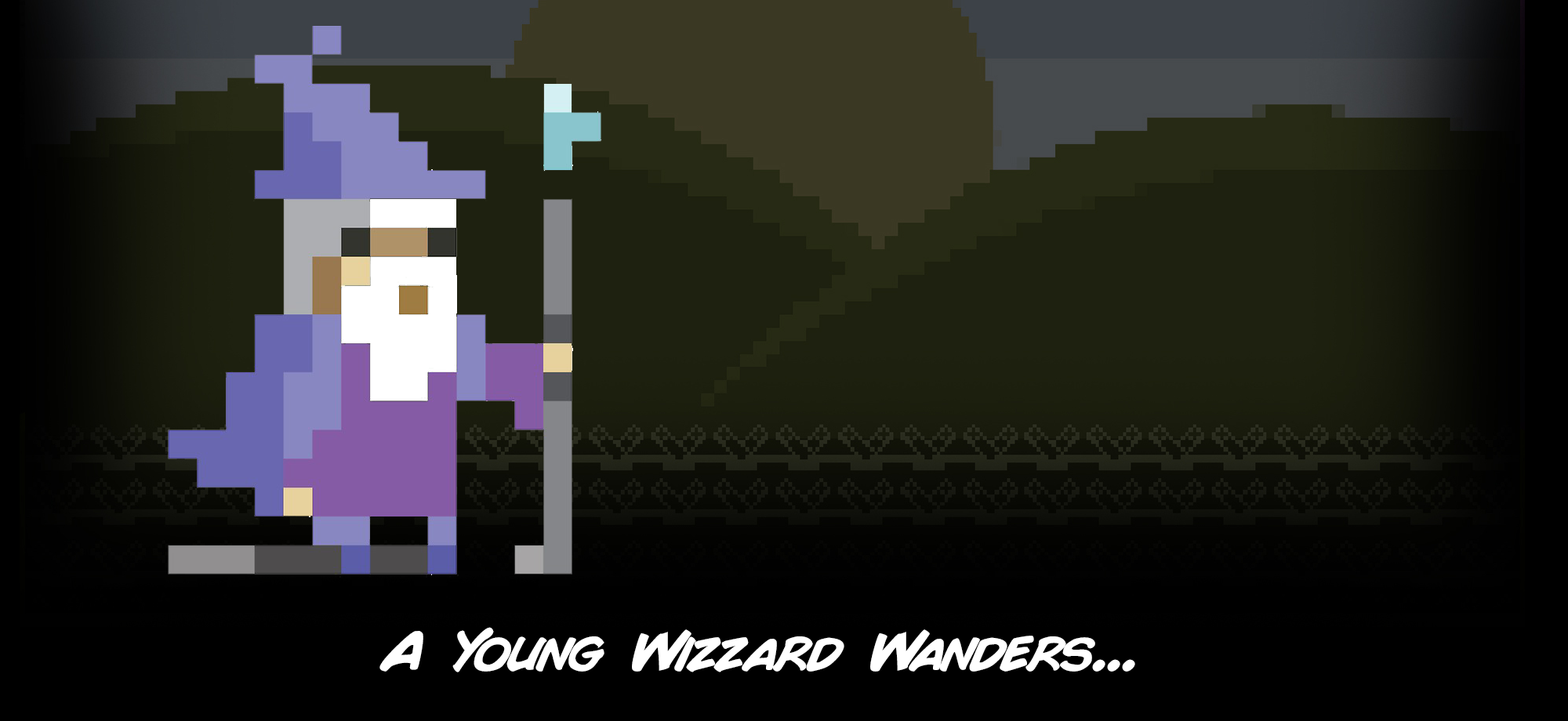
<style>
.page{position:relative;width:1568px;height:721px}
.page>*{position:absolute;margin:0}
.t1{font:56.4px "ComicBook-BoldItalic";color:#ffffff}
</style>
<div class="page">
<p class="t1" style="left:379px;top:627px;width:756px;height:46px">A Young Wizzard Wanders...</p>
</div>
